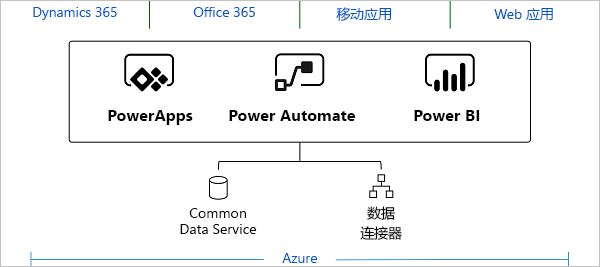
<style>
.page{position:relative;width:600px;height:267px;background:#ffffff}
.page>*{position:absolute;margin:0}
.t1{font:13.9px "SegoeUI";color:#0057cd}
.t2{font:13.9px "MicrosoftYaHei";color:#0057cd}
.t3{font:16.1px "SegoeUI-Bold";color:#020202}
.t4{font:13.9px "SegoeUI";color:#020202}
.t5{font:13.9px/20px "MicrosoftYaHei";color:#020202}
</style>
<div class="page">
<p class="t1" style="left:33px;top:7px;width:84px;height:13px">Dynamics 365</p>
<p class="t1" style="left:193px;top:7px;width:62px;height:10px">Office 365</p>
<p class="t2" style="left:336px;top:7px;width:56px;height:15px">移动应用</p>
<p class="t1" style="left:494px;top:8px;width:59px;height:12px">Web <span class="t2">应用</span></p>
<p class="t3" style="left:108px;top:110px;width:85px;height:15px">PowerApps</p>
<p class="t3" style="left:229px;top:110px;width:126px;height:11px">Power Automate</p>
<p class="t3" style="left:414px;top:110px;width:66px;height:11px">Power BI</p>
<p class="t4" style="left:180px;top:208px;width:77px;height:26px;text-align:center">Common Data Service</p>
<p class="t5" style="left:360px;top:206px;width:42px;height:34px;text-align:center">数据<br>连接器</p>
<p class="t1" style="left:282px;top:253px;width:36px;height:10px">Azure</p>
</div>
